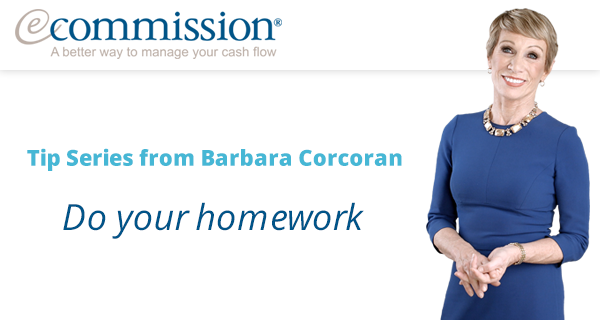
<style>
.page{position:relative;width:600px;height:320px;background:#ffffff}
.page>*{position:absolute;margin:0}
.t1{font:22px "OpenSans-Extrabold";color:#46b7d5}
.t2{font:36px "OpenSans-Italic";color:#005488}
</style>
<div class="page">
<p class="t1" style="left:27px;top:148px;width:375px;height:23px">Tip Series from Barbara Corcoran</p>
<p class="t2" style="left:63px;top:202px;width:301px;height:37px">Do your homework</p>
</div>
